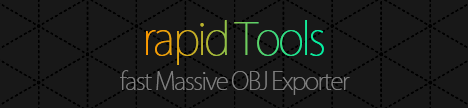
<style>
.page{position:relative;width:468px;height:108px;background:#181818}
.page>*{position:absolute;margin:0}
.t1{font:44.1px "KozGoPr6N-ExtraLight";letter-spacing:-0.06em}
.t2{font:24.1px "KozGoPr6N-ExtraLight";letter-spacing:-0.06em;color:#7f7f7f}
</style>
<div class="page">
<p class="t1" style="left:146px;top:20px;width:178px;height:45px">rapid Tools</p>
<p class="t2" style="left:120px;top:70px;width:230px;height:25px">fast Massive OBJ Exporter</p>
</div>
